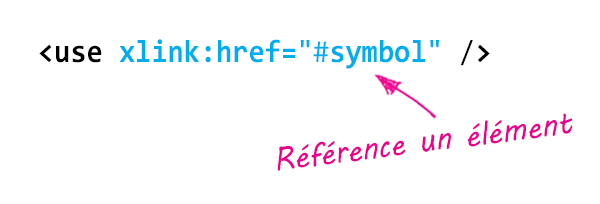
<style>
.page{position:relative;width:600px;height:204px;background:#ffffff}
.page>*{position:absolute;margin:0}
.t1{font:32px "Consolas-Bold";color:#00aeef;scale:0.92 1}
.t2{font:32px "Consolas-Bold";color:#000000;scale:0.92 1}
.t3{font:32px "Consolas";color:#00aeef;scale:0.92 1}
.t4{font:32px "Consolas";color:#000000;scale:0.92 1}
.t5{font:32px "MVBoli";color:#ec008c;scale:0.92 1}
</style>
<div class="page">
<p class="t1" style="left:39px;top:39px;width:451px;height:30px"><span class="t2">&lt;use </span>xlink:href=<span class="t3">"#</span>symbol<span class="t3">"</span><span class="t4"> /</span><span class="t2">&gt;</span></p>
<p class="t5" style="left:277px;top:113px;width:296px;height:58px;rotate:-7deg">Référence un élément</p>
</div>
